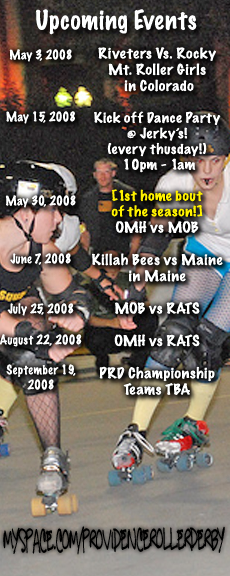
<style>
.page{position:relative;width:230px;height:576px}
.page>*{position:absolute;margin:0}
.t1{font:24px "MarkerFelt-Thin";color:#feffff}
.t2{font:12px/17px "MarkerFelt-Thin";color:#feffff}
.t3{font:12px/24px "MarkerFelt-Thin";color:#feffff}
.t4{font:12px/14px "MarkerFelt-Thin";color:#feffff}
.t5{font:12px/16px "MarkerFelt-Thin";color:#feffff}
.t6{font:12px/15px "MarkerFelt-Thin";color:#feffff}
.t7{font:13.5px "MarkerFelt-Thin";color:#feffff;scale:1.17 1}
.t8{font:13px "MarkerFelt-Thin";color:#ffffff;scale:1.17 1}
.t9{font:13px "MarkerFelt-Thin";color:#fff200;scale:1.17 1}
.t10{font:31px "GregsOtherHand";color:#000000;scale:0.49 1}
</style>
<div class="page">
<p class="t1" style="left:36px;top:9px;width:161px;height:26px">Upcoming Events</p>
<p class="t2" style="left:0px;top:49px;width:82px;height:341px;text-align:center"><span class="t3">May 3, 2008<br><br></span><span class="t4"><br></span><span class="t3">May 15, 2008<br><br><br><br>May 30, 2008<br><br><br><br></span><span class="t5">June 7, 2008<br><br></span><br>July 25, 2008<br><br>August 22, 2008<br><span class="t6"><br>September 19, 2008</span></p>
<p class="t7" style="left:92px;top:47px;width:131px;height:348px;text-align:center">Riveters Vs. Rocky Mt. Roller Girls <br> in Colorado<br><br><span class="t8">Kick off Dance Party <br>@ Jerky’s!  <br>(every thusday!)<br> 10pm - 1am<br></span><span class="t9"><br>[1st home bout <br>of the season!] <br></span>OMH vs MOB<br><br>Killah Bees vs Maine in Maine<br><br>MOB vs RATS<br><br>OMH vs RATS<br><br>PRD Championship<br>Teams TBA</p>
<p class="t10" style="left:3px;top:526px;width:222px;height:29px">Myspace.com/Providencerollerderby</p>
</div>
